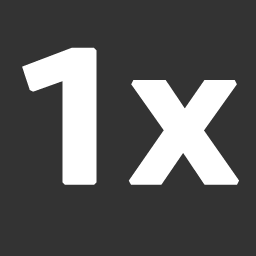
<style>
.page{position:relative;width:256px;height:256px;background:#333333}
.page>*{position:absolute;margin:0}
.t1{font:190px "BreezeSans-Bold";color:#ffffff;font-weight:bold;scale:1.05 1}
</style>
<div class="page">
<p class="t1" style="left:22px;top:47px;width:217px;height:138px">1x</p>
</div>
